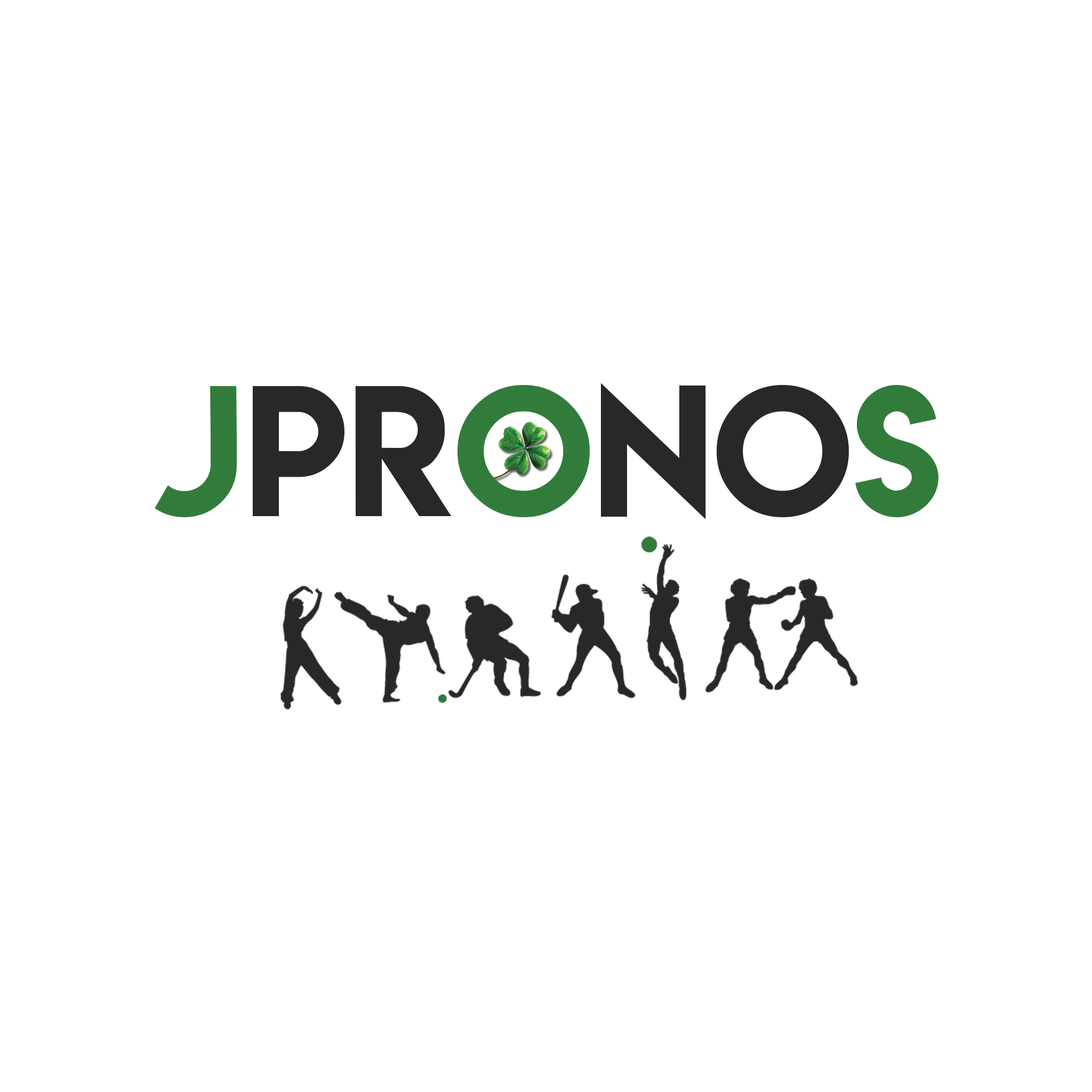
<style>
.page{position:relative;width:1092px;height:1092px;background:#ffffff}
.page>*{position:absolute;margin:0}
.t1{font:165.3px "LemonMilk";color:#282828}
.t2{font:165.3px "LemonMilk";color:#327c3b}
</style>
<div class="page">
<p class="t1" style="left:155px;top:383px;width:783px;height:136px"><span class="t2">J</span>PR<span class="t2">O</span>NO<span class="t2">S</span></p>
</div>
